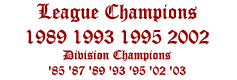
<style>
.page{position:relative;width:237px;height:80px;background:#ffffff}
.page>*{position:absolute;margin:0}
.t1{font:13px "OldEnglishTextMT";color:#990000}
.t2{font:20.7px "OldEnglishTextMT";color:#990000}
</style>
<div class="page">
<p class="t1" style="left:26px;top:3px;width:183px;height:73px;text-align:center"><span class="t2">League Champions<br>1989 1993 1995 2002<br></span>Division Champions<br>'85 '87 '89 '93 '95 '02 '03</p>
</div>
